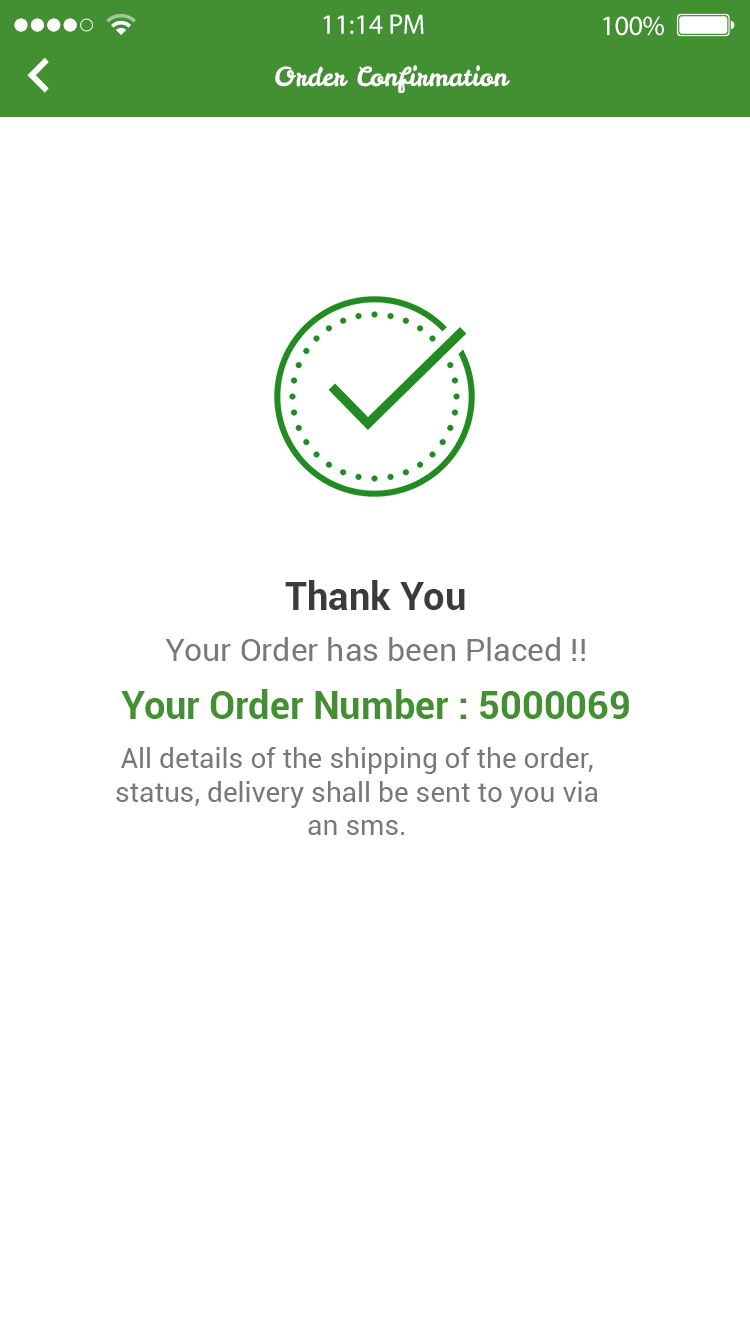
<style>
.page{position:relative;width:750px;height:1334px;background:#ffffff}
.page>*{position:absolute;margin:0}
.t1{font:26px "LeckerliOne-Regular";color:#ffffff}
.t2{font:38px "Roboto-Bold";color:#3b3b3b}
.t3{font:32px "Roboto-Regular";color:#787878}
.t4{font:38px "Roboto-Bold";color:#439033}
.t5{font:28px "Roboto-Regular";color:#787878}
</style>
<div class="page">
<p class="t1" style="left:275px;top:65px;width:235px;height:29px">Order Confirmation</p>
<p class="t2" style="left:285px;top:580px;width:180px;height:30px">Thank You</p>
<p class="t3" style="left:165px;top:637px;width:420px;height:24px">Your Order has been Placed !!</p>
<p class="t4" style="left:121px;top:689px;width:508px;height:30px">Your Order Number : 5000069</p>
<p class="t5" style="left:116px;top:747px;width:482px;height:88px;text-align:center">All details of the shipping of the order,<br>status, delivery shall be sent to you via<br>an sms.</p>
</div>
